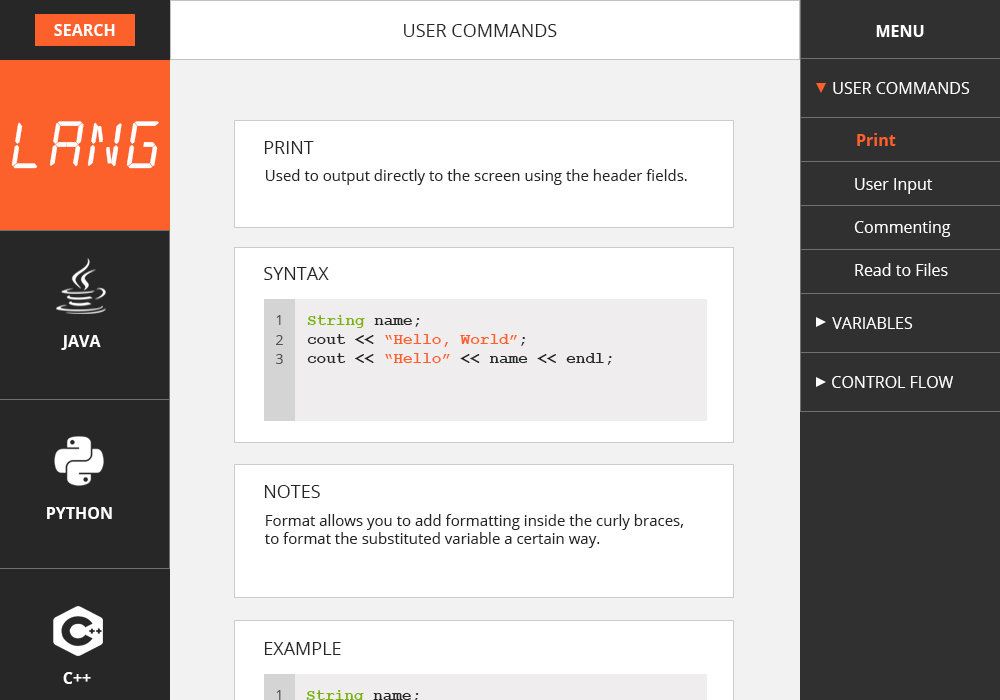
<style>
.page{position:relative;width:1000px;height:700px;background:#ffffff}
.page>*{position:absolute;margin:0}
.t1{font:16px "OpenSans-Bold";color:#ffffff}
.t2{font:18px "OpenSans";color:#272727}
.t3{font:16px "OpenSans";color:#ffffff}
.t4{font:66.4px "alarmclock";color:#ffffff}
.t5{font:16px "OpenSans-Bold";color:#fd612b}
.t6{font:18px "OpenSans";color:#262626}
.t7{font:15px "OpenSans";color:#262626}
.t8{font:14px "OpenSans";color:#545353}
.t9{font:16px "CourierNewPS-BoldMT";color:#262626}
.t10{font:16px "CourierNewPS-BoldMT";color:#7ab201}
.t11{font:16px "CourierNewPS-BoldMT";color:#fd612b}
</style>
<div class="page">
<p class="t1" style="left:54px;top:24px;width:61px;height:12px">SEARCH</p>
<p class="t2" style="left:404px;top:24px;width:153px;height:13px">USER COMMANDS</p>
<p class="t1" style="left:876px;top:25px;width:48px;height:12px">MENU</p>
<p class="t3" style="left:833px;top:82px;width:137px;height:12px">USER COMMANDS</p>
<p class="t4" style="left:11px;top:121px;width:148px;height:48px">LANG</p>
<p class="t5" style="left:857px;top:133px;width:39px;height:13px">Print</p>
<p class="t6" style="left:264px;top:141px;width:50px;height:13px">PRINT</p>
<p class="t7" style="left:266px;top:169px;width:421px;height:16px">Used to output directly to the screen using the header fields.</p>
<p class="t3" style="left:855px;top:178px;width:78px;height:16px">User Input</p>
<p class="t3" style="left:854px;top:221px;width:97px;height:16px">Commenting</p>
<p class="t6" style="left:264px;top:267px;width:65px;height:13px">SYNTAX</p>
<p class="t3" style="left:855px;top:263px;width:93px;height:13px">Read to Files</p>
<p class="t8" style="left:276px;top:315px;width:5px;height:10px">1</p>
<p class="t9" style="left:307px;top:315px;width:305px;height:50px"><span class="t10">String </span>name;<br>cout &lt;&lt; <span class="t11">“Hello, World”</span>;<br>cout &lt;&lt; <span class="t11">“Hello”</span> &lt;&lt; name &lt;&lt; endl;</p>
<p class="t3" style="left:832px;top:317px;width:81px;height:12px">VARIABLES</p>
<p class="t1" style="left:61px;top:335px;width:40px;height:15px">JAVA</p>
<p class="t8" style="left:276px;top:335px;width:7px;height:10px">2</p>
<p class="t8" style="left:276px;top:354px;width:7px;height:10px">3</p>
<p class="t3" style="left:832px;top:376px;width:121px;height:12px">CONTROL FLOW</p>
<p class="t6" style="left:264px;top:485px;width:56px;height:13px">NOTES</p>
<p class="t1" style="left:47px;top:507px;width:65px;height:12px">PYTHON</p>
<p class="t7" style="left:264px;top:514px;width:419px;height:34px">Format allows you to add formatting inside the curly braces, <br>to format the substituted variable a certain way.</p>
<p class="t6" style="left:264px;top:642px;width:77px;height:13px">EXAMPLE</p>
<p class="t1" style="left:63px;top:672px;width:28px;height:12px">C++</p>
<p class="t8" style="left:276px;top:690px;width:5px;height:10px">1</p>
</div>
